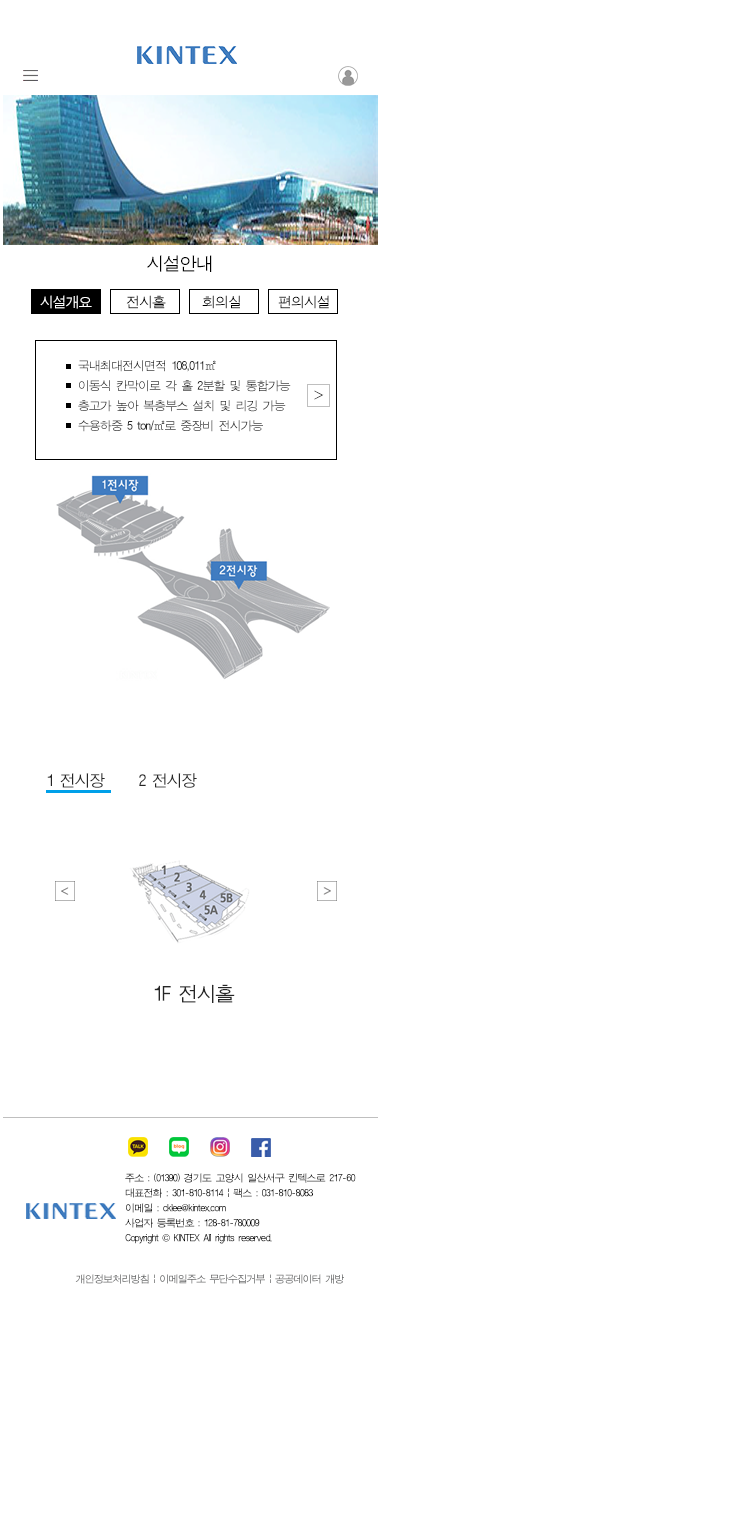
<style>
.page{position:relative;width:743px;height:1515px;background:#ffffff}
.page>*{position:absolute;margin:0}
.t1{font:18px "ÈÞ¸Õ°íµñ";letter-spacing:-0.08em;color:#010101}
.t2{font:14px "ÈÞ¸Õ°íµñ";letter-spacing:-0.08em;color:#ffffff}
.t3{font:14px "ÈÞ¸Õ°íµñ";letter-spacing:-0.08em;color:#000000}
.t4{font:12px/20px "ÈÞ¸Õ°íµñ";letter-spacing:-0.08em;color:#262626}
.t5{font:16px "ÈÞ¸Õ°íµñ";letter-spacing:-0.08em;color:#262626}
.t6{font:20px "ÈÞ¸Õ°íµñ";letter-spacing:-0.08em;color:#262626}
.t7{font:10px/15px "ÈÞ¸Õ°íµñ";letter-spacing:-0.08em;color:#020202}
.t8{font:10px/15px "Gulim";letter-spacing:-0.08em;color:#020202}
.t9{font:10px "ÈÞ¸Õ°íµñ";letter-spacing:-0.08em}
</style>
<div class="page">
<p class="t1" style="left:147px;top:255px;width:65px;height:17px">시설안내</p>
<p class="t2" style="left:40px;top:295px;width:52px;height:14px">시설개요</p>
<p class="t3" style="left:126px;top:295px;width:40px;height:14px">전시홀</p>
<p class="t3" style="left:202px;top:295px;width:38px;height:14px">회의실</p>
<p class="t3" style="left:278px;top:295px;width:51px;height:14px">편의시설</p>
<p class="t4" style="left:78px;top:360px;width:213px;height:72px">국내최대전시면적 108,011㎡<br>이동식 칸막이로 각 홀 2분할 및 통합가능<br>층고가 높아 복층부스 설치 및 리깅 가능<br>수용하중 5 ton/㎡로 중장비 전시가능</p>
<p class="t5" style="left:47px;top:773px;width:150px;height:15px">1 전시장      2 전시장</p>
<p class="t6" style="left:154px;top:984px;width:81px;height:19px">1F 전시홀</p>
<p class="t7" style="left:125px;top:1173px;width:231px;height:71px">주소 : (01390) 경기도 고양시 일산서구 킨텍스로 217-60<br>대표전화 : 301-810-8114 | 팩스 : 031-810-8083<br>이메일 : cklee@kintex.com <br>사업자 등록번호 : 128-81-780009<br>Copyright <span class="t8">©</span> KINTEX All rights reserved.</p>
<p class="t9" style="left:75px;top:1274px;width:269px;height:10px">개인정보처리방침 | 이메일주소 무단수집거부 | 공공데이터 개방</p>
</div>
